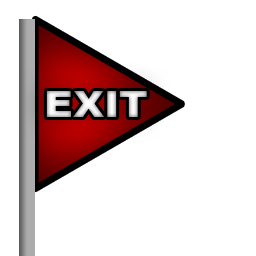
<style>
.page{position:relative;width:256px;height:256px;background:#ffffff}
.page>*{position:absolute;margin:0}
.t1{font:36px "Arial-Black";scale:1.11 1}
</style>
<div class="page">
<p class="t1" style="left:46px;top:91px;width:101px;height:26px">EXIT</p>
</div>
